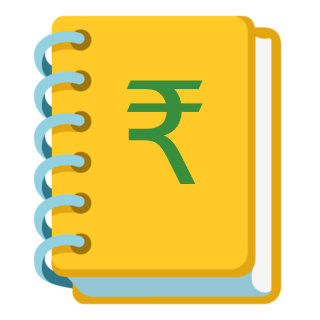
<style>
.page{position:relative;width:320px;height:320px;background:#ffca28}
.page>*{position:absolute;margin:0}
.t1{font:142px "DejaVuSans";color:#388e3c}
</style>
<div class="page">
<p class="t1" style="left:126px;top:80px;width:77px;height:104px">₹</p>
</div>
